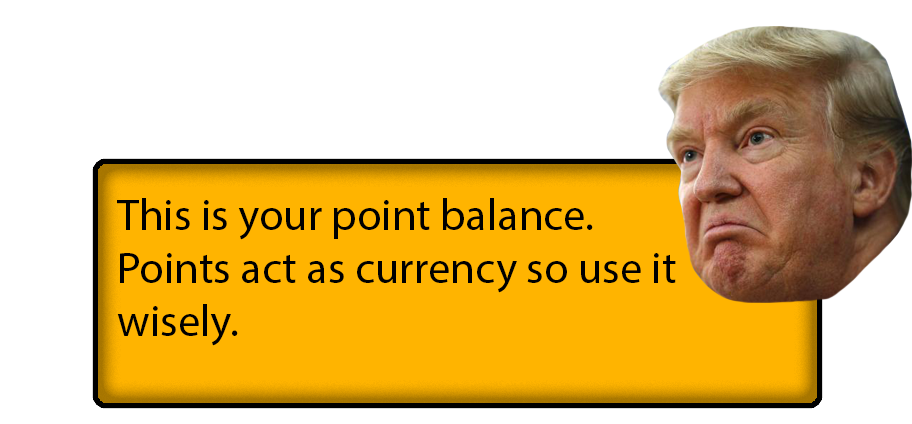
<style>
.page{position:relative;width:912px;height:424px;background:#ffffff}
.page>*{position:absolute;margin:0}
.t1{font:44.4px "MyriadPro-Regular";color:#000000}
</style>
<div class="page">
<p class="t1" style="left:117px;top:198px;width:559px;height:148px">This is your point balance.<br>Points act as currency so use it <br>wisely.</p>
</div>
